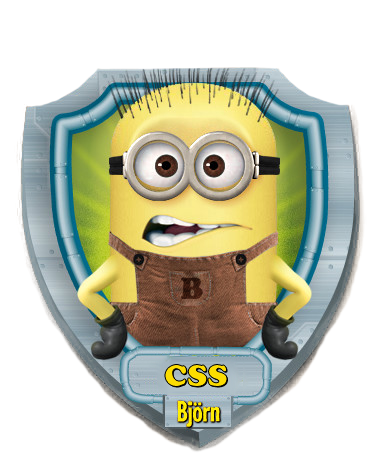
<style>
.page{position:relative;width:380px;height:473px;background:#ffffff}
.page>*{position:absolute;margin:0}
.t1{font:30px "CooperBlackStd";color:#38190f}
.t2{font:30px "CooperBlackStd";color:#fcdd00}
</style>
<div class="page">
<p class="t1" style="left:181px;top:277px;width:22px;height:22px">B</p>
<p class="t2" style="left:165px;top:364px;width:62px;height:23px">CSS</p>
</div>
